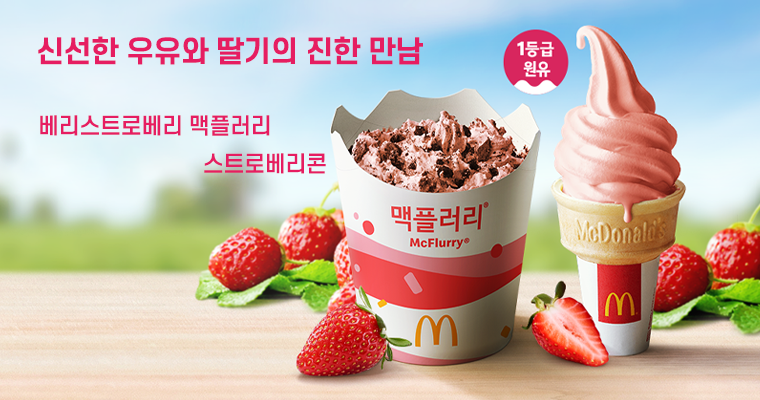
<style>
.page{position:relative;width:760px;height:400px}
.page>*{position:absolute;margin:0}
.t1{font:29px "S-CoreDream-6Bold";letter-spacing:-0.02em;color:#e61d61}
.t2{font:22px "S-CoreDream-5Medium";letter-spacing:-0.02em;color:#e61d61}
</style>
<div class="page">
<p class="t1" style="left:38px;top:36px;width:385px;height:29px">신선한 우유와 딸기의 진한 만남</p>
<p class="t2" style="left:40px;top:115px;width:230px;height:21px">베리스트로베리 맥플러리</p>
<p class="t2" style="left:204px;top:153px;width:122px;height:21px">스트로베리콘</p>
</div>
